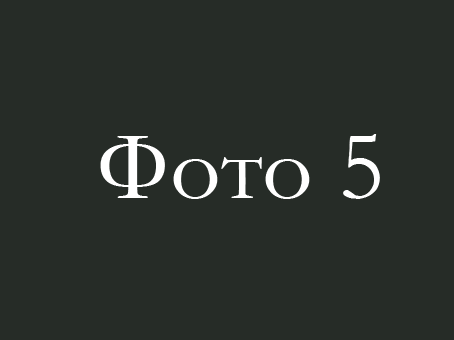
<style>
.page{position:relative;width:454px;height:340px;background:#262c27}
.page>*{position:absolute;margin:0}
.t1{font:100px "Garamond";color:#ffffff}
</style>
<div class="page">
<p class="t1" style="left:100px;top:134px;width:280px;height:65px">Фото 5</p>
</div>
